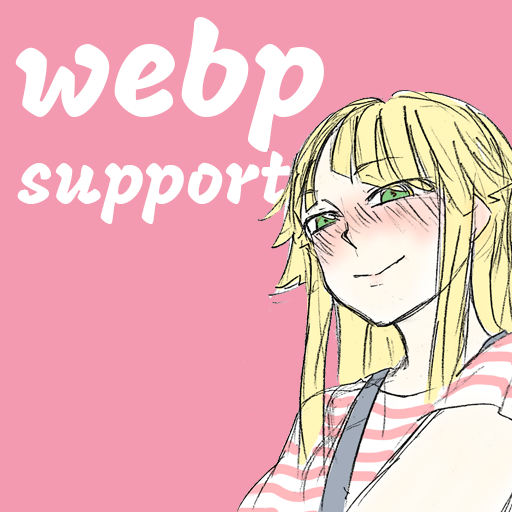
<style>
.page{position:relative;width:512px;height:512px;background:#f49ab0}
.page>*{position:absolute;margin:0}
.t1{font:72px "Mogra-Regular";color:#ffffff}
.t2{font:130px "Mogra-Regular";color:#ffffff}
</style>
<div class="page">
<p class="t1" style="left:15px;top:17px;width:309px;height:207px"><span class="t2">webp<br></span>support</p>
</div>
